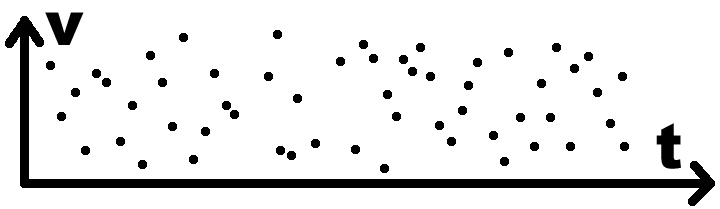
<style>
.page{position:relative;width:720px;height:209px;background:#ffffff}
.page>*{position:absolute;margin:0}
.t1{font:62.5px "Arial-Black";color:#010101}
</style>
<div class="page">
<p class="t1" style="left:45px;top:12px;width:39px;height:33px">v</p>
<p class="t1" style="left:656px;top:123px;width:25px;height:46px">t</p>
</div>
